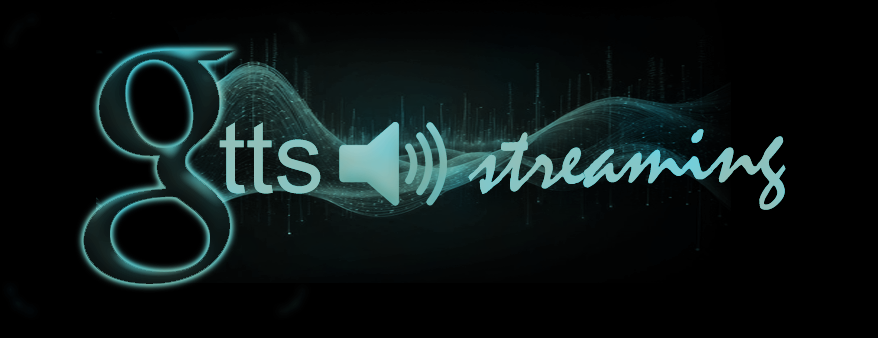
<style>
.page{position:relative;width:878px;height:338px;background:#000000}
.page>*{position:absolute;margin:0}
.t1{font:100px "ArialMT";color:#8fc1bc}
.t2{font:100px "Mistral";color:#88c4c3}
</style>
<div class="page">
<p class="t1" style="left:219px;top:122px;width:102px;height:72px">tts</p>
<p class="t2" style="left:468px;top:129px;width:318px;height:81px;rotate:-2deg">streaming</p>
</div>
